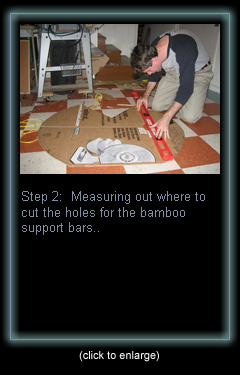
<style>
.page{position:relative;width:240px;height:375px;background:#000000}
.page>*{position:absolute;margin:0}
.t1{font:13px "ArialMT";color:#828fa3}
.t2{font:11px "ArialMT";color:#ffffff}
</style>
<div class="page">
<p class="t1" style="left:22px;top:191px;width:183px;height:44px">Step 2:  Measuring out where to<br>cut the holes for the bamboo<br>support bars..</p>
<p class="t2" style="left:79px;top:351px;width:80px;height:11px">(click to enlarge)</p>
</div>
